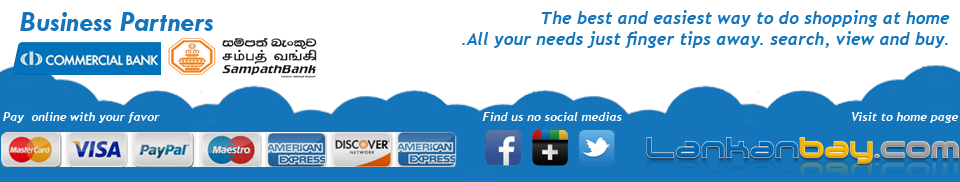
<style>
.page{position:relative;width:960px;height:182px;background:#ffffff}
.page>*{position:absolute;margin:0}
.t1{font:30.2px "TwCenMT-BoldItalic";color:#1475ba}
.t2{font:17.4px "Trebuchet-BoldItalic";color:#1475ba}
.t3{font:12.1px "Trebuchet-BoldItalic";color:#ffffff}
</style>
<div class="page">
<p class="t1" style="left:20px;top:12px;width:193px;height:19px">Business Partners</p>
<p class="t2" style="left:462px;top:10px;width:488px;height:38px;text-align:right">The best and easiest way to do shopping at home<br>.All your needs just finger tips away. search, view and buy.</p>
<p class="t3" style="left:3px;top:112px;width:157px;height:11px">Pay  online with your favor</p>
<p class="t3" style="left:482px;top:112px;width:140px;height:9px">Find us no social medias</p>
<p class="t3" style="left:852px;top:112px;width:107px;height:11px">Visit to home page</p>
</div>
